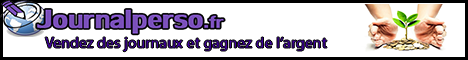
<style>
.page{position:relative;width:468px;height:60px;background:#ffffff}
.page>*{position:absolute;margin:0}
.t1{font:15px "MyriadHebrew-Regular";font-weight:bold}
</style>
<div class="page">
<p class="t1" style="left:45px;top:37px;width:282px;height:15px">Vendez des journaux et gagnez de l’argent</p>
</div>
